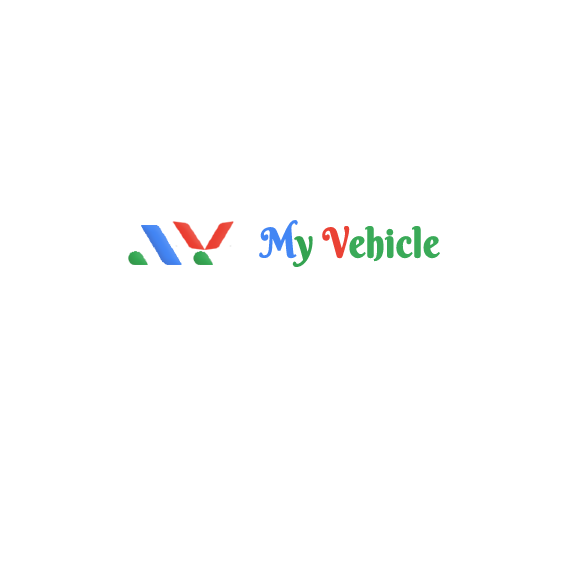
<style>
.page{position:relative;width:564px;height:564px;background:#ffffff}
.page>*{position:absolute;margin:0}
.t1{font:40.3px "BerkshireSwash-Regular";color:#3aaa58;font-weight:bold;scale:0.86 1}
.t2{font:40.3px "BerkshireSwash-Regular";color:#4386f4;font-weight:bold;scale:0.86 1}
.t3{font:40.3px "BerkshireSwash-Regular";color:#34a351;font-weight:bold;scale:0.86 1}
.t4{font:40.3px "BerkshireSwash-Regular";color:#ea4235;font-weight:bold;scale:0.86 1}
</style>
<div class="page">
<p class="t1" style="left:259px;top:220px;width:181px;height:47px"><span class="t2">M</span><span class="t3">y</span><span class="t4"> V</span>ehicle</p>
</div>
